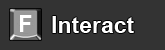
<style>
.page{position:relative;width:165px;height:50px;background:#333333}
.page>*{position:absolute;margin:0}
.t1{font:23px "Arial-BoldMT";color:#ffffff}
</style>
<div class="page">
<p class="t1" style="left:20px;top:15px;width:12px;height:17px">F</p>
<p class="t1" style="left:52px;top:16px;width:82px;height:17px">Interact</p>
</div>
